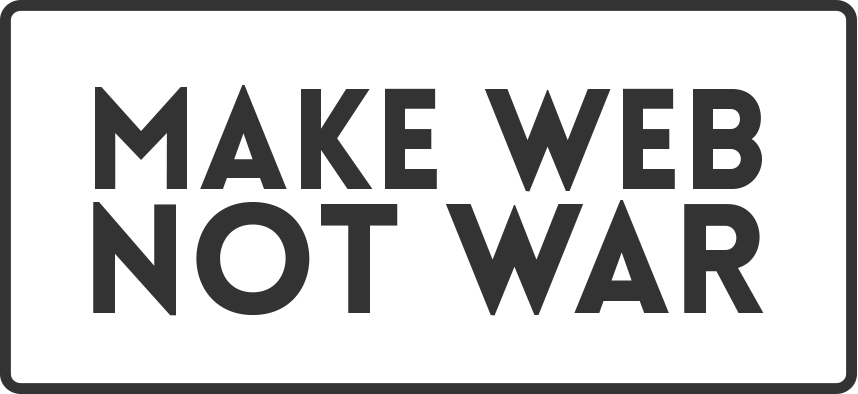
<style>
.page{position:relative;width:858px;height:394px;background:#ffffff}
.page>*{position:absolute;margin:0}
.t1{font:140px "Lovelo-Black";color:#333333}
.t2{font:152.9px "Lovelo-Black";color:#333333}
</style>
<div class="page">
<p class="t1" style="left:95px;top:85px;width:667px;height:107px">MAKE WEB</p>
<p class="t2" style="left:93px;top:200px;width:671px;height:116px">NOT WAR</p>
</div>
